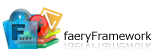
<style>
.page{position:relative;width:153px;height:55px;background:#ffffff}
.page>*{position:absolute;margin:0}
.t1{font:11px "MeiryoUI";color:#000000}
.t2{font:11px "MeiryoUI";color:#d5d5d5}
</style>
<div class="page">
<p class="t1" style="left:64px;top:31px;width:88px;height:12px">faeryFramework</p>
<p class="t2" style="left:64px;top:40px;width:88px;height:12px">faeryFramework</p>
</div>
